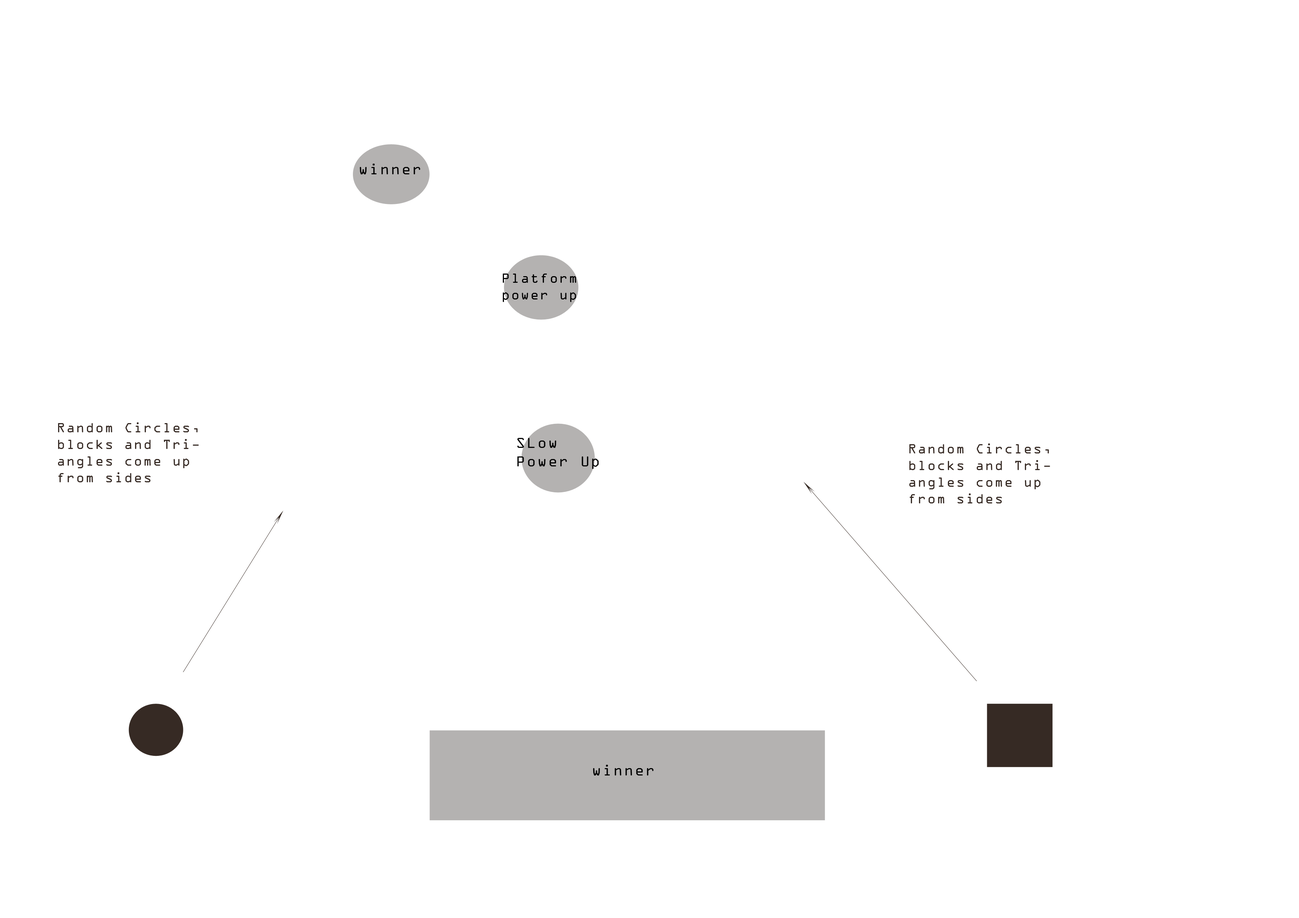
<style>
.page{position:relative;width:1299px;height:918px;background:#ffffff}
.page>*{position:absolute;margin:0}
.t1{font:15.4px "OCRAExtended";letter-spacing:0.09em;color:#000000}
.t2{font:13.9px "OCRAExtended";letter-spacing:0.09em;color:#000000}
.t3{font:13.9px "OCRAExtended";letter-spacing:0.09em;color:#362a24}
</style>
<div class="page">
<p class="t1" style="left:359px;top:164px;width:61px;height:10px">winner</p>
<p class="t2" style="left:502px;top:274px;width:74px;height:28px">Platform<br>power up</p>
<p class="t3" style="left:58px;top:422px;width:141px;height:60px">Random Circles, blocks and Triangles come up from sides</p>
<p class="t3" style="left:909px;top:444px;width:141px;height:60px">Random Circles, blocks and Triangles come up from sides</p>
<p class="t1" style="left:593px;top:765px;width:60px;height:11px">winner</p>
</div>
